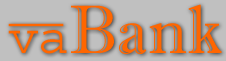
<style>
.page{position:relative;width:226px;height:61px;background:#c0c0c0}
.page>*{position:absolute;margin:0}
.t1{font:68.6px "ImprintMT-Shadow";color:#ff6600}
.t2{font:51.4px "Courier";color:#ff6600}
</style>
<div class="page">
<p class="t1" style="left:8px;top:4px;width:214px;height:50px"><span class="t2">va</span>Bank</p>
</div>
